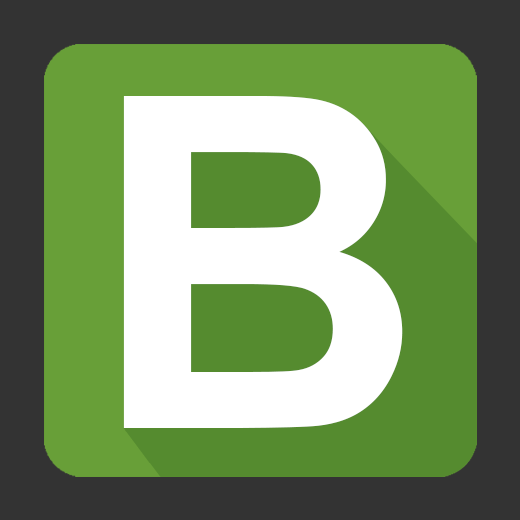
<style>
.page{position:relative;width:520px;height:520px;background:#333333}
.page>*{position:absolute;margin:0}
.t1{font:463.6px "Arial-BoldMT";color:#ffffff}
</style>
<div class="page">
<p class="t1" style="left:123px;top:96px;width:280px;height:332px">B</p>
</div>
